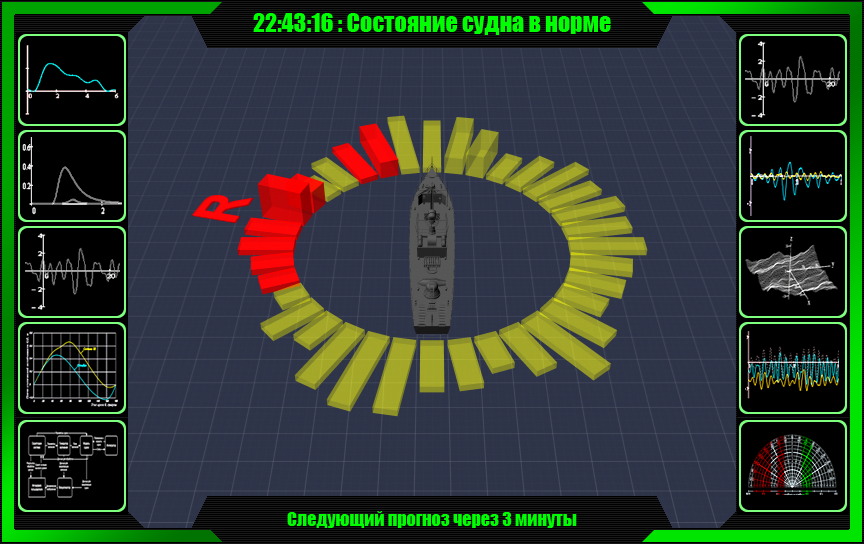
<style>
.page{position:relative;width:864px;height:544px;background:#000000}
.page>*{position:absolute;margin:0}
.t1{font:24px "Impact";color:#00ff00}
.t2{font:18px "Impact";color:#00ff00}
</style>
<div class="page">
<p class="t1" style="left:253px;top:13px;width:358px;height:22px">22:43:16 : Состояние судна в норме</p>
<p class="t2" style="left:287px;top:511px;width:290px;height:17px">Следующий прогноз через 3 минуты</p>
</div>
